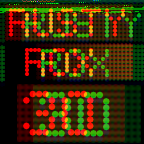
<style>
.page{position:relative;width:144px;height:144px}
.page>*{position:absolute;margin:0}
.t1{font:52px "TimesSquare"}
.t2{font:83px "TimesSquare"}
</style>
<div class="page">
<p class="t1" style="left:8px;top:6px;width:117px;height:29px">RUSTY</p>
<p class="t1" style="left:24px;top:46px;width:69px;height:28px">ROX</p>
<p class="t2" style="left:23px;top:88px;width:71px;height:46px">30</p>
</div>
